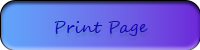
<style>
.page{position:relative;width:200px;height:50px}
.page>*{position:absolute;margin:0}
.t1{font:16px "SegoeScript";color:#1408b5}
</style>
<div class="page">
<p class="t1" style="left:54px;top:21px;width:94px;height:15px">Print Page</p>
</div>
